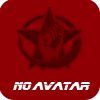
<style>
.page{position:relative;width:100px;height:100px;background:#8f0005}
.page>*{position:absolute;margin:0}
.t1{font:12px "BladeRunnerMovieFont";letter-spacing:-0.025em;color:#ffffff}
</style>
<div class="page">
<p class="t1" style="left:13px;top:82px;width:77px;height:8px">no avatar</p>
</div>
